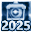
<style>
.page{position:relative;width:32px;height:32px}
.page>*{position:absolute;margin:0}
.t1{font:12px "MicrosoftYaHeiUI-Bold";color:#e1e8f1}
</style>
<div class="page">
<p class="t1" style="left:1px;top:20px;width:29px;height:11px">2025</p>
</div>
